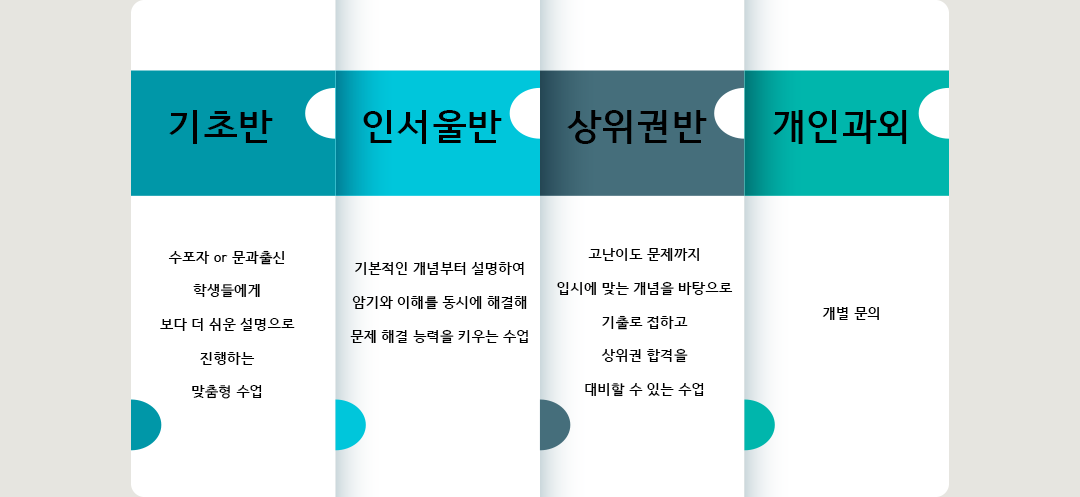
<style>
.page{position:relative;width:1080px;height:497px;background:#ffffff}
.page>*{position:absolute;margin:0}
.t1{font:36px "HCRDotum-Bold";color:#000000}
.t2{font:14px "HCRDotum-Bold";color:#000000}
</style>
<div class="page">
<p class="t1" style="left:169px;top:110px;width:104px;height:34px">기초반</p>
<p class="t1" style="left:363px;top:110px;width:139px;height:34px">인서울반</p>
<p class="t1" style="left:567px;top:110px;width:140px;height:34px">상위권반</p>
<p class="t1" style="left:773px;top:110px;width:134px;height:34px">개인과외</p>
<p class="t2" style="left:160px;top:250px;width:135px;height:149px;text-align:center">수포자 or 문과출신<br><br>학생들에게<br><br>보다 더 쉬운 설명으로<br><br>진행하는<br><br>맞춤형 수업</p>
<p class="t2" style="left:557px;top:248px;width:176px;height:149px;text-align:center">고난이도 문제까지<br><br>입시에 맞는 개념을 바탕으로<br><br>기출로 접하고<br><br>상위권 합격을<br><br>대비할 수 있는 수업</p>
<p class="t2" style="left:350px;top:262px;width:178px;height:82px;text-align:center">기본적인 개념부터 설명하여<br><br>암기와 이해를 동시에 해결해<br><br>문제 해결 능력을 키우는 수업</p>
<p class="t2" style="left:822px;top:307px;width:57px;height:13px">개별 문의</p>
</div>
